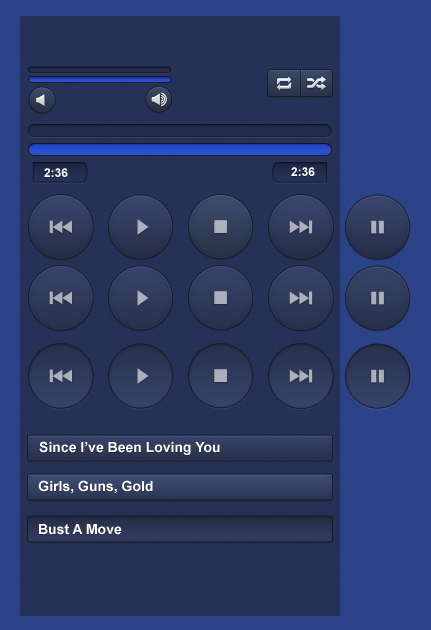
<style>
.page{position:relative;width:431px;height:630px}
.page>*{position:absolute;margin:0}
.t1{font:12px "Arial-BoldMT";color:#ffffff;text-transform:uppercase}
.t2{font:14px "Arial-BoldMT";color:#ffffff}
</style>
<div class="page">
<p class="t1" style="left:44px;top:168px;width:24px;height:9px">2:36</p>
<p class="t1" style="left:291px;top:167px;width:24px;height:9px">2:36</p>
<p class="t2" style="left:39px;top:441px;width:181px;height:14px">Since I’ve Been Loving You</p>
<p class="t2" style="left:38px;top:480px;width:115px;height:14px">Girls, Guns, Gold</p>
<p class="t2" style="left:39px;top:524px;width:83px;height:11px">Bust A Move</p>
</div>
